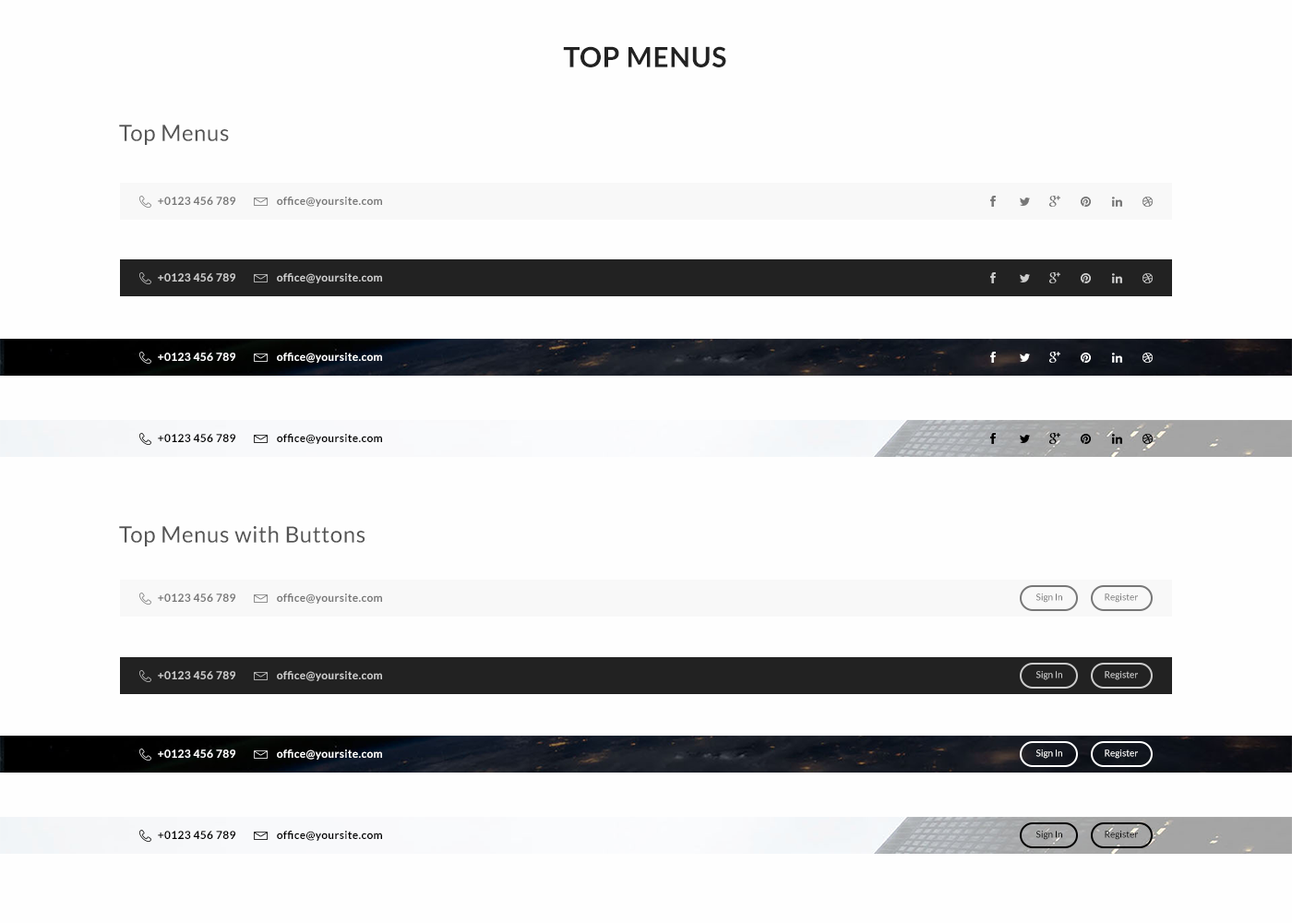
<style>
.page{position:relative;width:1292px;height:923px;background:#fefefe}
.page>*{position:absolute;margin:0}
.t1{font:27.7px "Lato-Bold";letter-spacing:0.025em;color:#222222}
.t2{font:22.1px "Lato-Regular";letter-spacing:0.025em;color:#555555}
.t3{font:11.1px "Lato-Bold";letter-spacing:0.025em;color:#777777}
.t4{font:11.1px "Lato-Bold";letter-spacing:0.025em;color:#cccccc}
.t5{font:11.1px "Lato-Bold";letter-spacing:0.025em;color:#ffffff}
.t6{font:11.1px "Lato-Bold";letter-spacing:0.025em;color:#010101}
.t7{font:11.1px "Lato-Bold";letter-spacing:0.025em;color:#000000}
.t8{font:9.2px "Lato-Regular";color:#777777}
.t9{font:9.2px "Lato-Regular";color:#cccccc}
.t10{font:9.2px "Lato-Regular";color:#ffffff}
.t11{font:9.2px "Lato-Regular";color:#000000}
</style>
<div class="page">
<p class="t1" style="left:563px;top:46px;width:163px;height:21px">TOP MENUS</p>
<p class="t2" style="left:119px;top:125px;width:110px;height:20px">Top Menus</p>
<p class="t3" style="left:158px;top:197px;width:77px;height:8px">+0123 456 789</p>
<p class="t3" style="left:277px;top:197px;width:105px;height:10px">office@yoursite.com</p>
<p class="t4" style="left:158px;top:273px;width:77px;height:8px">+0123 456 789</p>
<p class="t4" style="left:277px;top:273px;width:105px;height:10px">office@yoursite.com</p>
<p class="t5" style="left:158px;top:353px;width:77px;height:8px">+0123 456 789</p>
<p class="t5" style="left:277px;top:353px;width:105px;height:10px">office@yoursite.com</p>
<p class="t6" style="left:158px;top:434px;width:77px;height:8px">+0123 456 789</p>
<p class="t7" style="left:277px;top:434px;width:105px;height:10px">office@yoursite.com</p>
<p class="t2" style="left:119px;top:526px;width:246px;height:20px">Top Menus with Buttons</p>
<p class="t3" style="left:158px;top:593px;width:77px;height:9px">+0123 456 789</p>
<p class="t3" style="left:277px;top:593px;width:105px;height:11px">office@yoursite.com</p>
<p class="t8" style="left:1035px;top:593px;width:27px;height:10px">Sign In</p>
<p class="t8" style="left:1105px;top:593px;width:33px;height:10px">Register</p>
<p class="t4" style="left:158px;top:671px;width:77px;height:8px">+0123 456 789</p>
<p class="t4" style="left:277px;top:671px;width:105px;height:10px">office@yoursite.com</p>
<p class="t9" style="left:1035px;top:671px;width:27px;height:9px">Sign In</p>
<p class="t9" style="left:1105px;top:671px;width:33px;height:9px">Register</p>
<p class="t5" style="left:158px;top:749px;width:77px;height:9px">+0123 456 789</p>
<p class="t5" style="left:277px;top:749px;width:105px;height:11px">office@yoursite.com</p>
<p class="t10" style="left:1035px;top:749px;width:27px;height:10px">Sign In</p>
<p class="t10" style="left:1105px;top:749px;width:33px;height:10px">Register</p>
<p class="t6" style="left:158px;top:831px;width:77px;height:8px">+0123 456 789</p>
<p class="t7" style="left:277px;top:831px;width:105px;height:10px">office@yoursite.com</p>
<p class="t11" style="left:1035px;top:831px;width:27px;height:9px">Sign In</p>
<p class="t11" style="left:1105px;top:831px;width:33px;height:9px">Register</p>
</div>
